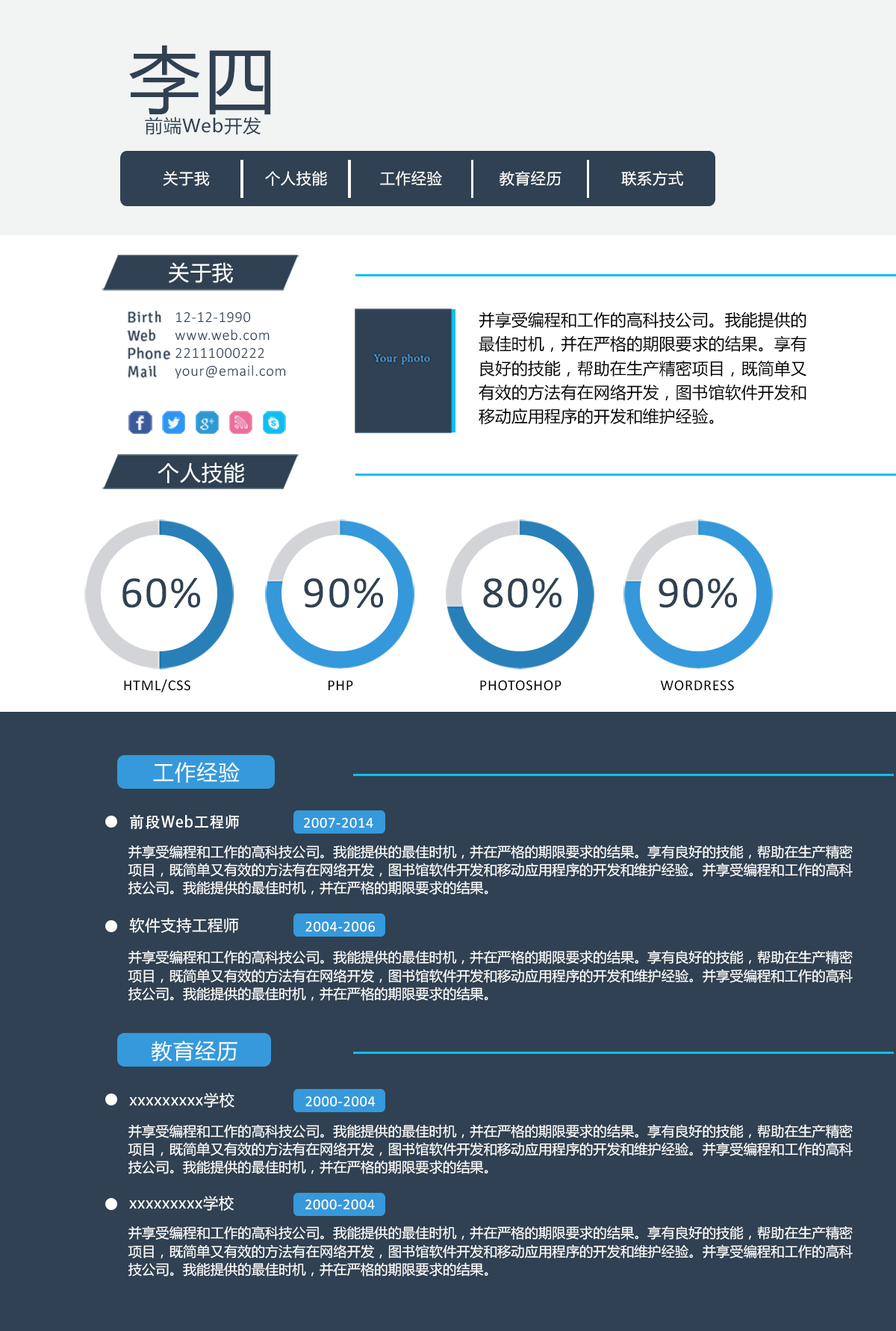
<style>
.page{position:relative;width:896px;height:1331px;background:#2f4152}
.page>*{position:absolute;margin:0}
.t1{font:72.3px "MicrosoftYaHei";letter-spacing:0.04em;color:#2f4152}
.t2{font:18.1px "MicrosoftYaHei";letter-spacing:0.04em;color:#2f4152}
.t3{font:37.7px "NewsGothicBT-Light";letter-spacing:0.06em;color:#ffffff}
.t4{font:15.1px "MicrosoftYaHei";letter-spacing:0.04em;color:#ffffff}
.t5{font:21.1px "MicrosoftYaHei";letter-spacing:0.04em;color:#ffffff}
.t6{font:15.1px "Signika-Regular";letter-spacing:0.04em;color:#2f4152}
.t7{font:15.1px "Calibri-Light";letter-spacing:0.04em;color:#2f4152}
.t8{font:16.3px/24.1px "MicrosoftYaHei";letter-spacing:0.009em;color:#000000}
.t9{font:45.2px "Calibri";letter-spacing:0.04em;color:#2f4152}
.t10{font:15.1px "Calibri";letter-spacing:0.04em;color:#000000}
.t11{font:15.1px "AdobeHeitiStd-Regular";letter-spacing:0.04em;color:#ffffff}
.t12{font:15.1px "Calibri";letter-spacing:0.04em;color:#ffffff}
.t13{font:13.6px/18.1px "MicrosoftYaHei";letter-spacing:0.009em;color:#ffffff}
</style>
<div class="page">
<p class="t1" style="left:129px;top:45px;width:142px;height:70px">李四</p>
<p class="t2" style="left:145px;top:116px;width:116px;height:19px">前端Web开发</p>
<p class="t3" style="left:240px;top:160px;width:3px;height:38px">|</p>
<p class="t3" style="left:348px;top:160px;width:3px;height:38px">|</p>
<p class="t3" style="left:471px;top:160px;width:2px;height:38px">|</p>
<p class="t3" style="left:587px;top:160px;width:2px;height:38px">|</p>
<p class="t4" style="left:163px;top:171px;width:47px;height:15px">关于我</p>
<p class="t4" style="left:265px;top:171px;width:62px;height:15px">个人技能</p>
<p class="t4" style="left:380px;top:171px;width:62px;height:15px">工作经验</p>
<p class="t4" style="left:500px;top:171px;width:62px;height:15px">教育经历</p>
<p class="t4" style="left:621px;top:171px;width:62px;height:15px">联系方式</p>
<p class="t5" style="left:169px;top:262px;width:64px;height:21px">关于我</p>
<p class="t6" style="left:127px;top:311px;width:43px;height:67px;text-align:right">Birth<br>Web<br>Phone<br>Mail</p>
<p class="t7" style="left:175px;top:311px;width:111px;height:68px;text-align:right">12-12-1990<br>www.web.com<br>22111000222<br>your@email.com</p>
<p class="t8" style="left:479px;top:311px;width:328px;height:114px;text-align:right">并享受编程和工作的高科技公司。我能提供的最佳时机，并在严格的期限要求的结果。享有良好的技能，帮助在生产精密项目，既简单又有效的方法有在网络开发，图书馆软件开发和移动应用程序的开发和维护经验。</p>
<p class="t5" style="left:158px;top:462px;width:86px;height:21px">个人技能</p>
<p class="t9" style="left:122px;top:577px;width:78px;height:31px">60%</p>
<p class="t9" style="left:304px;top:577px;width:79px;height:31px">90%</p>
<p class="t9" style="left:483px;top:577px;width:79px;height:31px">80%</p>
<p class="t9" style="left:659px;top:577px;width:78px;height:31px">90%</p>
<p class="t10" style="left:124px;top:679px;width:66px;height:13px">HTML/CSS</p>
<p class="t10" style="left:328px;top:680px;width:25px;height:11px">PHP</p>
<p class="t10" style="left:480px;top:680px;width:82px;height:11px">PHOTOSHOP</p>
<p class="t10" style="left:660px;top:680px;width:74px;height:11px">WORDRESS</p>
<p class="t5" style="left:153px;top:762px;width:87px;height:21px">工作经验</p>
<p class="t11" style="left:130px;top:815px;width:109px;height:14px">前段Web工程师</p>
<p class="t12" style="left:304px;top:817px;width:69px;height:11px">2007-2014</p>
<p class="t13" style="left:128px;top:845px;width:725px;height:50px;text-align:right">并享受编程和工作的高科技公司。我能提供的最佳时机，并在严格的期限要求的结果。享有良好的技能，帮助在生产精密项目，既简单又有效的方法有在网络开发，图书馆软件开发和移动应用程序的开发和维护经验。并享受编程和工作的高科技公司。我能提供的最佳时机，并在严格的期限要求的结果。</p>
<p class="t4" style="left:129px;top:917px;width:110px;height:16px">软件支持工程师</p>
<p class="t12" style="left:305px;top:921px;width:71px;height:11px">2004-2006</p>
<p class="t13" style="left:128px;top:950px;width:725px;height:51px;text-align:right">并享受编程和工作的高科技公司。我能提供的最佳时机，并在严格的期限要求的结果。享有良好的技能，帮助在生产精密项目，既简单又有效的方法有在网络开发，图书馆软件开发和移动应用程序的开发和维护经验。并享受编程和工作的高科技公司。我能提供的最佳时机，并在严格的期限要求的结果。</p>
<p class="t5" style="left:151px;top:1040px;width:86px;height:21px">教育经历</p>
<p class="t4" style="left:129px;top:1092px;width:105px;height:15px">xxxxxxxxx学校</p>
<p class="t12" style="left:305px;top:1095px;width:71px;height:12px">2000-2004</p>
<p class="t13" style="left:128px;top:1124px;width:725px;height:50px;text-align:right">并享受编程和工作的高科技公司。我能提供的最佳时机，并在严格的期限要求的结果。享有良好的技能，帮助在生产精密项目，既简单又有效的方法有在网络开发，图书馆软件开发和移动应用程序的开发和维护经验。并享受编程和工作的高科技公司。我能提供的最佳时机，并在严格的期限要求的结果。</p>
<p class="t4" style="left:129px;top:1196px;width:105px;height:14px">xxxxxxxxx学校</p>
<p class="t12" style="left:305px;top:1199px;width:70px;height:11px">2000-2004</p>
<p class="t13" style="left:128px;top:1225px;width:725px;height:51px;text-align:right">并享受编程和工作的高科技公司。我能提供的最佳时机，并在严格的期限要求的结果。享有良好的技能，帮助在生产精密项目，既简单又有效的方法有在网络开发，图书馆软件开发和移动应用程序的开发和维护经验。并享受编程和工作的高科技公司。我能提供的最佳时机，并在严格的期限要求的结果。</p>
</div>
